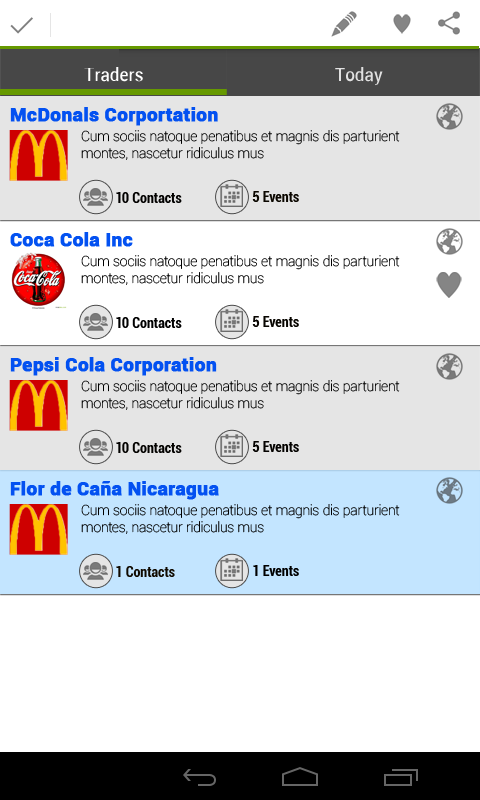
<style>
.page{position:relative;width:480px;height:800px;background:#ffffff}
.page>*{position:absolute;margin:0}
.t1{font:18px "Roboto-Condensed";color:#ffffff;scale:1.1 1}
.t2{font:18px "Roboto-Condensed";color:#e1e1e1;scale:1.1 1}
.t3{font:19px "Roboto-Black";color:#0351f1;font-weight:bold}
.t4{font:14px/18px "Roboto-Thin";color:#000000}
.t5{font:14px "Roboto-BoldCondensed";color:#020100}
.t6{font:14px "Roboto-BoldCondensed";color:#0b0700}
.t7{font:14px "Roboto-BoldCondensed";color:#000000}
.t8{font:14px "Roboto-BoldCondensed";color:#080500}
.t9{font:14px "Roboto-BoldCondensed";color:#030200}
.t10{font:14px "Roboto-BoldCondensed";color:#040200}
.t11{font:14px "Roboto-BoldCondensed";color:#100a00}
</style>
<div class="page">
<p class="t1" style="left:84px;top:67px;width:59px;height:15px">Traders</p>
<p class="t2" style="left:335px;top:67px;width:48px;height:19px">Today</p>
<p class="t3" style="left:10px;top:107px;width:208px;height:19px">McDonals Corportation</p>
<p class="t4" style="left:81px;top:130px;width:319px;height:30px">Cum sociis natoque penatibus et magnis dis parturient <br>montes, nascetur ridiculus mus</p>
<p class="t5" style="left:116px;top:192px;width:66px;height:11px">10 Contacts</p>
<p class="t6" style="left:252px;top:191px;width:47px;height:11px">5 Events</p>
<p class="t3" style="left:10px;top:232px;width:123px;height:15px">Coca Cola Inc</p>
<p class="t4" style="left:81px;top:255px;width:319px;height:30px">Cum sociis natoque penatibus et magnis dis parturient <br>montes, nascetur ridiculus mus</p>
<p class="t7" style="left:116px;top:317px;width:66px;height:11px">10 Contacts</p>
<p class="t8" style="left:252px;top:316px;width:47px;height:11px">5 Events</p>
<p class="t3" style="left:10px;top:357px;width:207px;height:19px">Pepsi Cola Corporation</p>
<p class="t4" style="left:81px;top:380px;width:319px;height:30px">Cum sociis natoque penatibus et magnis dis parturient <br>montes, nascetur ridiculus mus</p>
<p class="t9" style="left:116px;top:442px;width:66px;height:11px">10 Contacts</p>
<p class="t10" style="left:252px;top:441px;width:47px;height:11px">5 Events</p>
<p class="t3" style="left:10px;top:481px;width:209px;height:19px">Flor de Caña Nicaragua</p>
<p class="t4" style="left:81px;top:504px;width:319px;height:30px">Cum sociis natoque penatibus et magnis dis parturient <br>montes, nascetur ridiculus mus</p>
<p class="t11" style="left:116px;top:566px;width:59px;height:11px">1 Contacts</p>
<p class="t7" style="left:253px;top:565px;width:46px;height:11px">1 Events</p>
</div>
